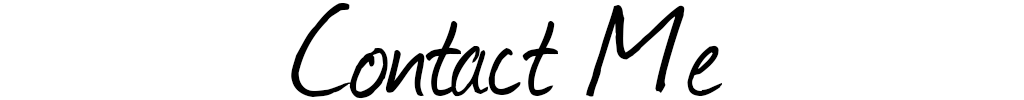
<style>
.page{position:relative;width:1024px;height:100px;background:#ffffff}
.page>*{position:absolute;margin:0}
.t1{font:148.4px "Journal";color:#000000}
</style>
<div class="page">
<p class="t1" style="left:291px;top:3px;width:431px;height:96px">Contact Me</p>
</div>
